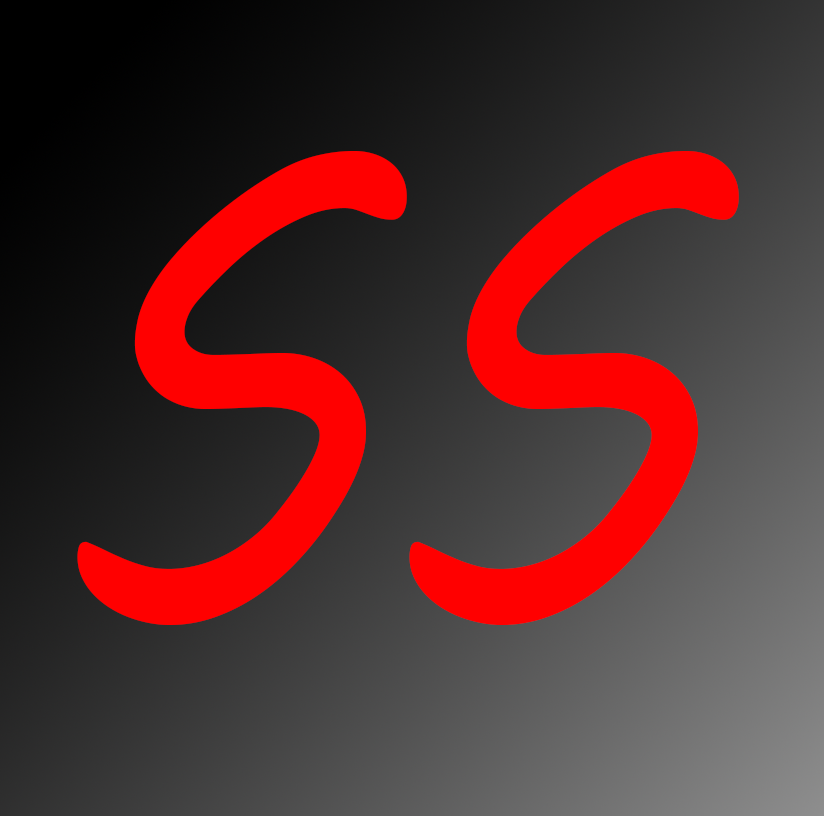
<style>
.page{position:relative;width:824px;height:816px}
.page>*{position:absolute;margin:0}
.t1{font:596.8px "MVBoli";color:#ff0000;scale:0.91 1}
</style>
<div class="page">
<p class="t1" style="left:77px;top:151px;width:662px;height:474px">SS</p>
</div>
